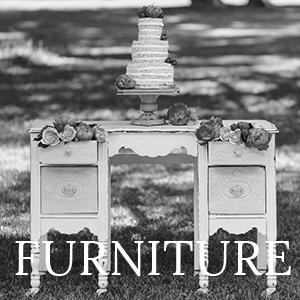
<style>
.page{position:relative;width:300px;height:300px}
.page>*{position:absolute;margin:0}
.t1{font:47.6px "Lora-Regular";letter-spacing:0.025em;color:#ffffff}
</style>
<div class="page">
<p class="t1" style="left:15px;top:241px;width:276px;height:35px">FURNITURE</p>
</div>
